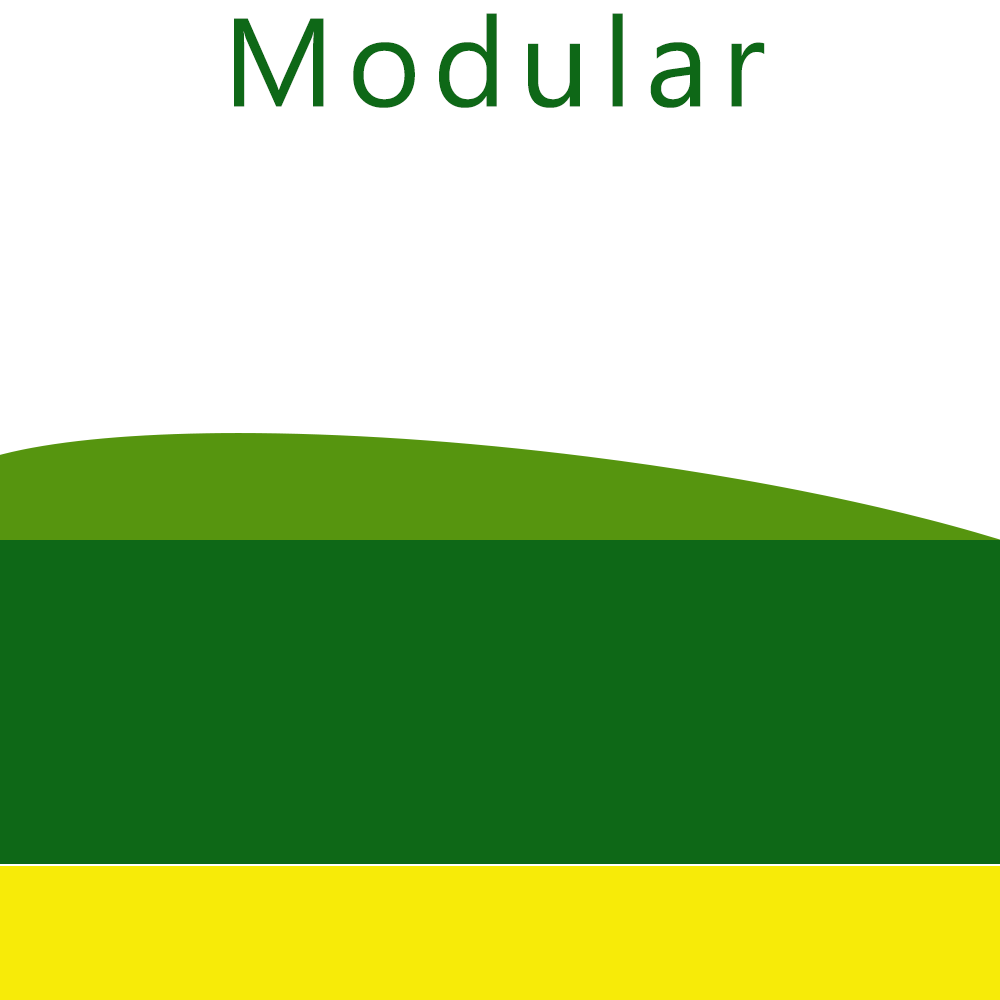
<style>
.page{position:relative;width:1000px;height:1000px;background:#ffffff}
.page>*{position:absolute;margin:0}
.t1{font:125px "MicrosoftTaiLe";letter-spacing:0.1em;color:#0e6817}
</style>
<div class="page">
<p class="t1" style="left:234px;top:13px;width:531px;height:95px">Modular</p>
</div>
